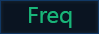
<style>
.page{position:relative;width:99px;height:34px;background:#0a1421}
.page>*{position:absolute;margin:0}
.t1{font:23.3px "SegoeUISymbol";color:#19b579}
</style>
<div class="page">
<p class="t1" style="left:29px;top:7px;width:43px;height:21px">Freq</p>
</div>
